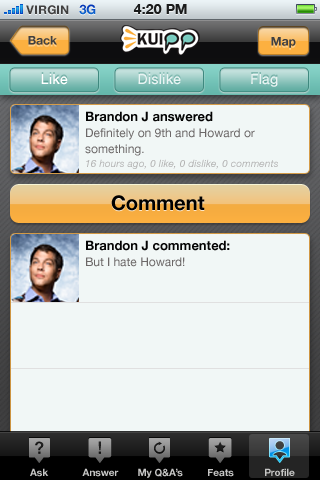
<style>
.page{position:relative;width:320px;height:480px;background:#f1f7f6}
.page>*{position:absolute;margin:0}
.t1{font:12px "HelveticaNeue-Bold";color:#404040;text-transform:uppercase}
.t2{font:13px "HelveticaNeue-Bold";color:#0c54c5;text-transform:uppercase}
.t3{font:14px "HelveticaNeue-Bold";color:#1a1b1b;text-transform:uppercase}
.t4{font:12px "HelveticaNeue-Bold";color:#404041}
.t5{font:14px "HelveticaNeue-Medium";letter-spacing:0.01em;color:#ffffff}
.t6{font:14px "HelveticaNeue-Medium";letter-spacing:0.01em;color:#e9f4f3}
.t7{font:12px/16px "HelveticaNeue";color:#6c6868}
.t8{font:13px/44px "HelveticaNeue-Bold";color:#040404}
.t9{font:10px/14px "HelveticaNeue-Italic";letter-spacing:0.01em;color:#b3b3b3}
.t10{font:20px "HelveticaNeue-Bold";color:#000000}
.t11{font:10px "HelveticaNeue-Bold";color:#c6c6c5}
</style>
<div class="page">
<p class="t1" style="left:26px;top:5px;width:43px;height:10px">VIRGIN</p>
<p class="t2" style="left:79px;top:4px;width:17px;height:11px">3G</p>
<p class="t3" style="left:133px;top:4px;width:54px;height:10px">4:20 PM</p>
<p class="t4" style="left:28px;top:36px;width:29px;height:9px">Back</p>
<p class="t4" style="left:271px;top:37px;width:25px;height:11px">Map</p>
<p class="t5" style="left:41px;top:74px;width:27px;height:11px">Like</p>
<p class="t6" style="left:138px;top:74px;width:43px;height:11px">Dislike</p>
<p class="t6" style="left:251px;top:74px;width:27px;height:13px">Flag</p>
<p class="t7" style="left:85px;top:111px;width:193px;height:58px"><span class="t8">Brandon J answered<br></span>Definitely on 9th and Howard or <br>something.<br><span class="t9">16 hours ago, 0 like, 0 dislike, 0 comments</span></p>
<p class="t10" style="left:111px;top:195px;width:94px;height:16px">Comment</p>
<p class="t8" style="left:86px;top:240px;width:144px;height:27px">Brandon J commented:<br><span class="t7">But I hate Howard!</span></p>
<p class="t11" style="left:30px;top:468px;width:19px;height:9px">Ask</p>
<p class="t11" style="left:82px;top:468px;width:37px;height:9px">Answer</p>
<p class="t11" style="left:138px;top:468px;width:45px;height:10px">My Q&amp;A’s</p>
<p class="t11" style="left:208px;top:469px;width:26px;height:8px">Feats</p>
<p class="t11" style="left:265px;top:468px;width:30px;height:8px">Profile</p>
</div>
